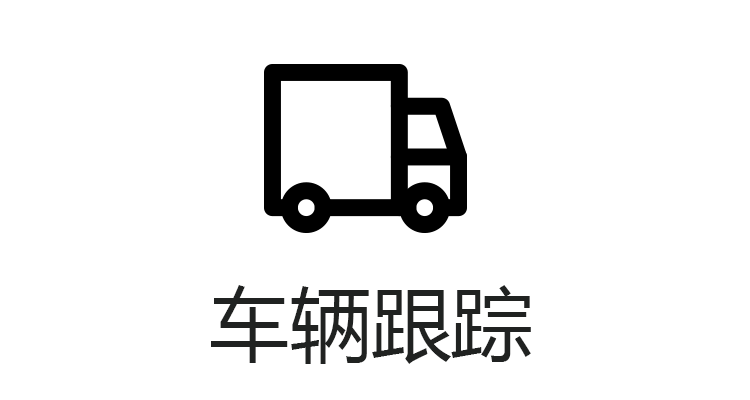
<style>
.page{position:relative;width:750px;height:400px;background:#ffffff}
.page>*{position:absolute;margin:0}
.t1{font:80.7px "MicrosoftYaHei";color:#202221}
</style>
<div class="page">
<p class="t1" style="left:211px;top:285px;width:320px;height:79px">车辆跟踪</p>
</div>
